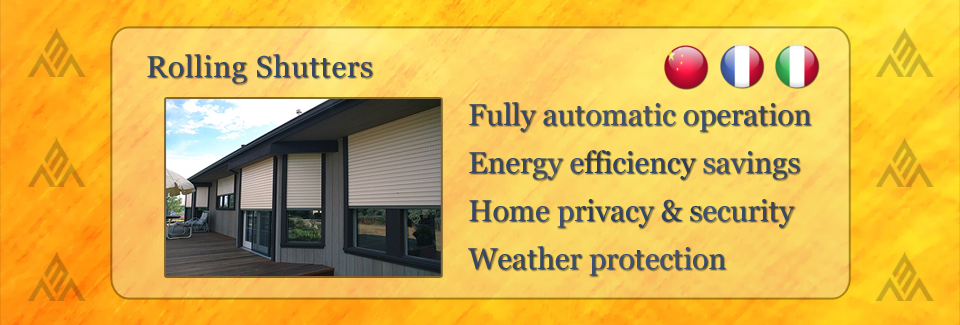
<style>
.page{position:relative;width:960px;height:325px}
.page>*{position:absolute;margin:0}
.t1{font:30px "Georgia";letter-spacing:0.025em;color:#364866}
.t2{font:30px/48px "Georgia";color:#364969}
</style>
<div class="page">
<p class="t1" style="left:147px;top:54px;width:225px;height:30px">Rolling Shutters</p>
<p class="t2" style="left:468px;top:102px;width:343px;height:174px">Fully automatic operation<br>Energy efficiency savings<br>Home privacy &amp; security<br>Weather protection</p>
</div>
